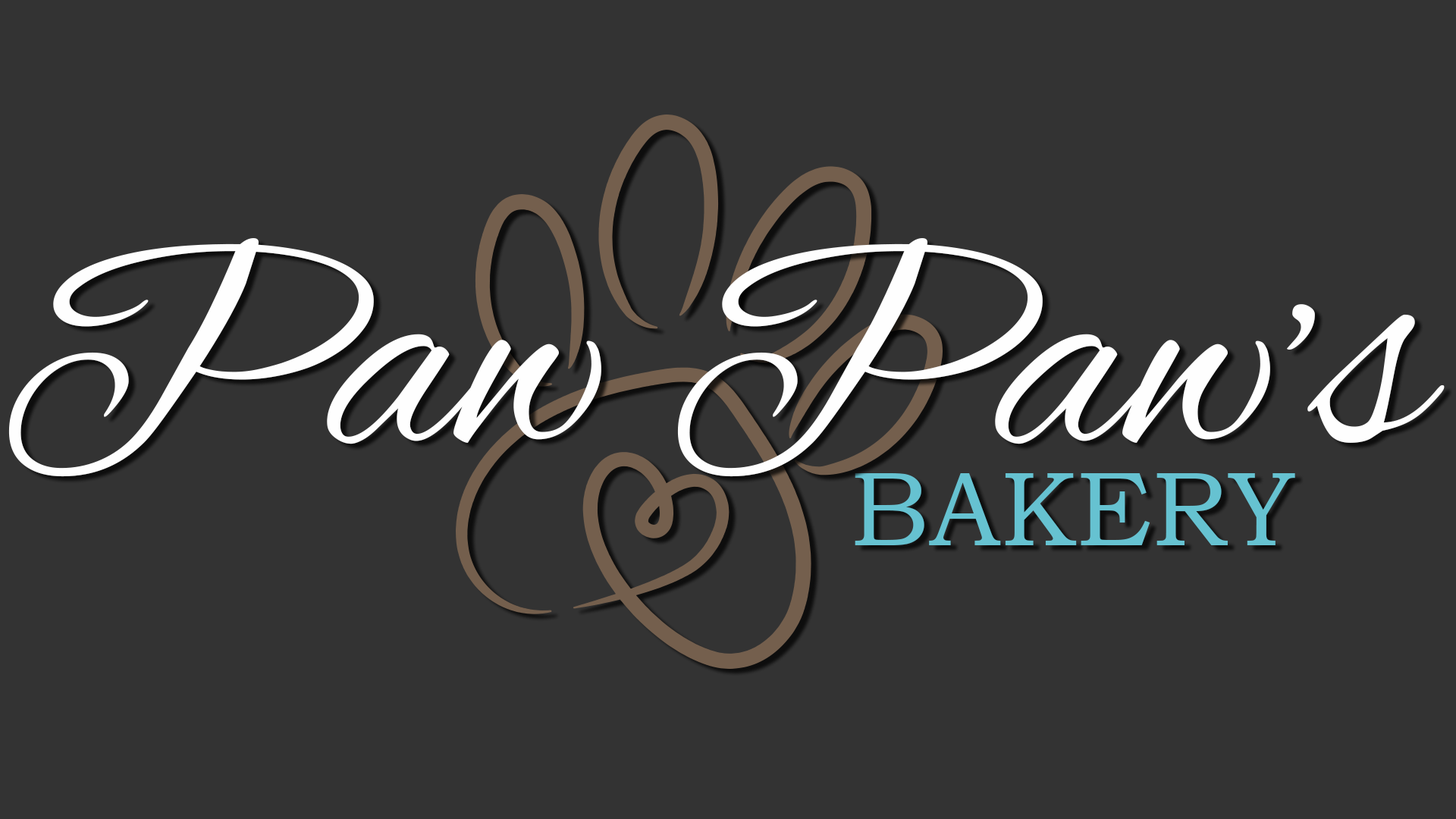
<style>
.page{position:relative;width:1456px;height:819px;background:#333333}
.page>*{position:absolute;margin:0}
.t1{font:316px "AlexBrush-Regular";color:#fefefe}
.t2{font:105.3px "BookmanOldStyle";color:#66c2d1}
</style>
<div class="page">
<p class="t1" style="left:8px;top:238px;width:1437px;height:239px">Paw Paw’s</p>
<p class="t2" style="left:855px;top:473px;width:440px;height:72px">BAKERY</p>
</div>
